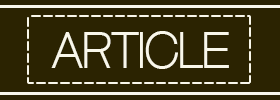
<style>
.page{position:relative;width:280px;height:100px;background:#2b2301}
.page>*{position:absolute;margin:0}
.t1{font:50px "Aliquam";color:#f9f7ea}
</style>
<div class="page">
<p class="t1" style="left:51px;top:31px;width:178px;height:38px">ARTICLE</p>
</div>
